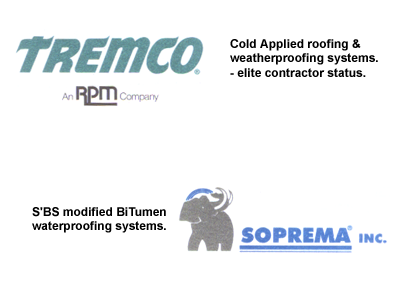
<style>
.page{position:relative;width:400px;height:300px;background:#ffffff}
.page>*{position:absolute;margin:0}
.t1{font:12px "Arial-BoldMT";color:#000000}
</style>
<div class="page">
<p class="t1" style="left:230px;top:39px;width:148px;height:38px">Cold Applied roofing &amp;<br>weatherproofing systems.<br>- elite contractor status.</p>
<p class="t1" style="left:32px;top:207px;width:134px;height:26px">S'BS modified BiTumen<br>waterproofing systems.</p>
</div>
